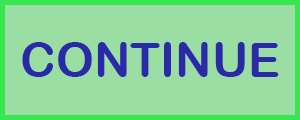
<style>
.page{position:relative;width:300px;height:120px;background:#9bdea4}
.page>*{position:absolute;margin:0}
.t1{font:48px "ArialRoundedMTBold";color:#2a2aa8}
</style>
<div class="page">
<p class="t1" style="left:22px;top:42px;width:257px;height:35px">CONTINUE</p>
</div>
